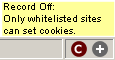
<style>
.page{position:relative;width:115px;height:60px;background:#ffff99}
.page>*{position:absolute;margin:0}
.t1{font:10px "ArialMT";color:#000000}
</style>
<div class="page">
<p class="t1" style="left:4px;top:3px;width:97px;height:31px">Record Off:<br>Only whitelisted sites<br>can set cookies.</p>
</div>
